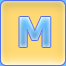
<style>
.page{position:relative;width:66px;height:66px}
.page>*{position:absolute;margin:0}
.t1{font:41px "Tahoma-Bold"}
</style>
<div class="page">
<p class="t1" style="left:19px;top:17px;width:32px;height:30px">М</p>
<p class="t1" style="left:19px;top:17px;width:32px;height:30px">М</p>
</div>
